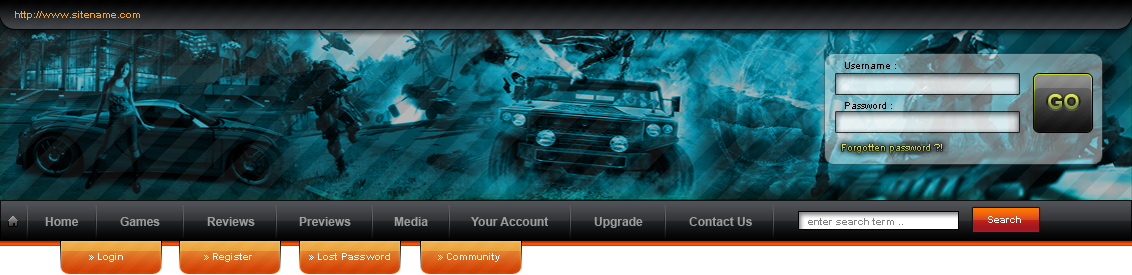
<style>
.page{position:relative;width:1132px;height:275px}
.page>*{position:absolute;margin:0}
.t1{font:10px "Arial-BoldMT";color:#ffa800}
.t2{font:10px "ArialMT";color:#010101}
.t3{font:10px "ArialMT"}
.t4{font:12px "Arial-BoldMT";color:#9b9b9b}
.t5{font:10px "Arial-BoldMT";color:#818181}
.t6{font:10px "Arial-BoldMT";color:#ffffff}
</style>
<div class="page">
<p class="t1" style="left:15px;top:11px;width:125px;height:9px">http://www.sitename.com</p>
<p class="t2" style="left:845px;top:62px;width:51px;height:7px">Username :</p>
<p class="t2" style="left:845px;top:102px;width:47px;height:7px">Password :</p>
<p class="t3" style="left:842px;top:144px;width:100px;height:9px">Forgotten password ?!</p>
<p class="t4" style="left:45px;top:217px;width:34px;height:9px">Home</p>
<p class="t4" style="left:120px;top:217px;width:40px;height:9px">Games</p>
<p class="t4" style="left:207px;top:217px;width:48px;height:9px">Reviews</p>
<p class="t4" style="left:299px;top:217px;width:52px;height:9px">Previews</p>
<p class="t4" style="left:394px;top:217px;width:34px;height:9px">Media</p>
<p class="t4" style="left:471px;top:217px;width:78px;height:9px">Your Account</p>
<p class="t4" style="left:594px;top:217px;width:49px;height:11px">Upgrade</p>
<p class="t4" style="left:689px;top:217px;width:63px;height:9px">Contact Us</p>
<p class="t5" style="left:808px;top:218px;width:95px;height:7px">enter search term ..</p>
<p class="t6" style="left:988px;top:216px;width:33px;height:7px">Search</p>
<p class="t6" style="left:89px;top:253px;width:34px;height:9px">» Login</p>
<p class="t6" style="left:204px;top:253px;width:48px;height:9px">» Register</p>
<p class="t6" style="left:309px;top:253px;width:81px;height:7px">» Lost Password</p>
<p class="t6" style="left:438px;top:253px;width:62px;height:9px">» Community</p>
</div>
